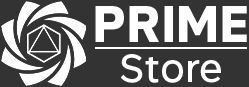
<style>
.page{position:relative;width:249px;height:87px;background:#333333}
.page>*{position:absolute;margin:0}
.t1{font:50.9px "RutanTrial-Bold";color:#ffffff}
.t2{font:38.8px "RutanTrial-Medium";color:#ffffff}
</style>
<div class="page">
<p class="t1" style="left:95px;top:6px;width:152px;height:36px">PRIME</p>
<p class="t2" style="left:120px;top:54px;width:101px;height:29px">Store</p>
</div>
